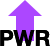
<style>
.page{position:relative;width:50px;height:50px;background:#ffffff}
.page>*{position:absolute;margin:0}
.t1{font:22px "HelveticaNeue-Bold";color:#000000}
</style>
<div class="page">
<p class="t1" style="left:0px;top:30px;width:50px;height:16px">PWR</p>
</div>
